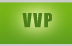
<style>
.page{position:relative;width:72px;height:46px}
.page>*{position:absolute;margin:0}
.t1{font:18px "Impact";letter-spacing:0.06em;color:#4c7f1a}
</style>
<div class="page">
<p class="t1" style="left:22px;top:13px;width:30px;height:15px">VVP</p>
</div>
